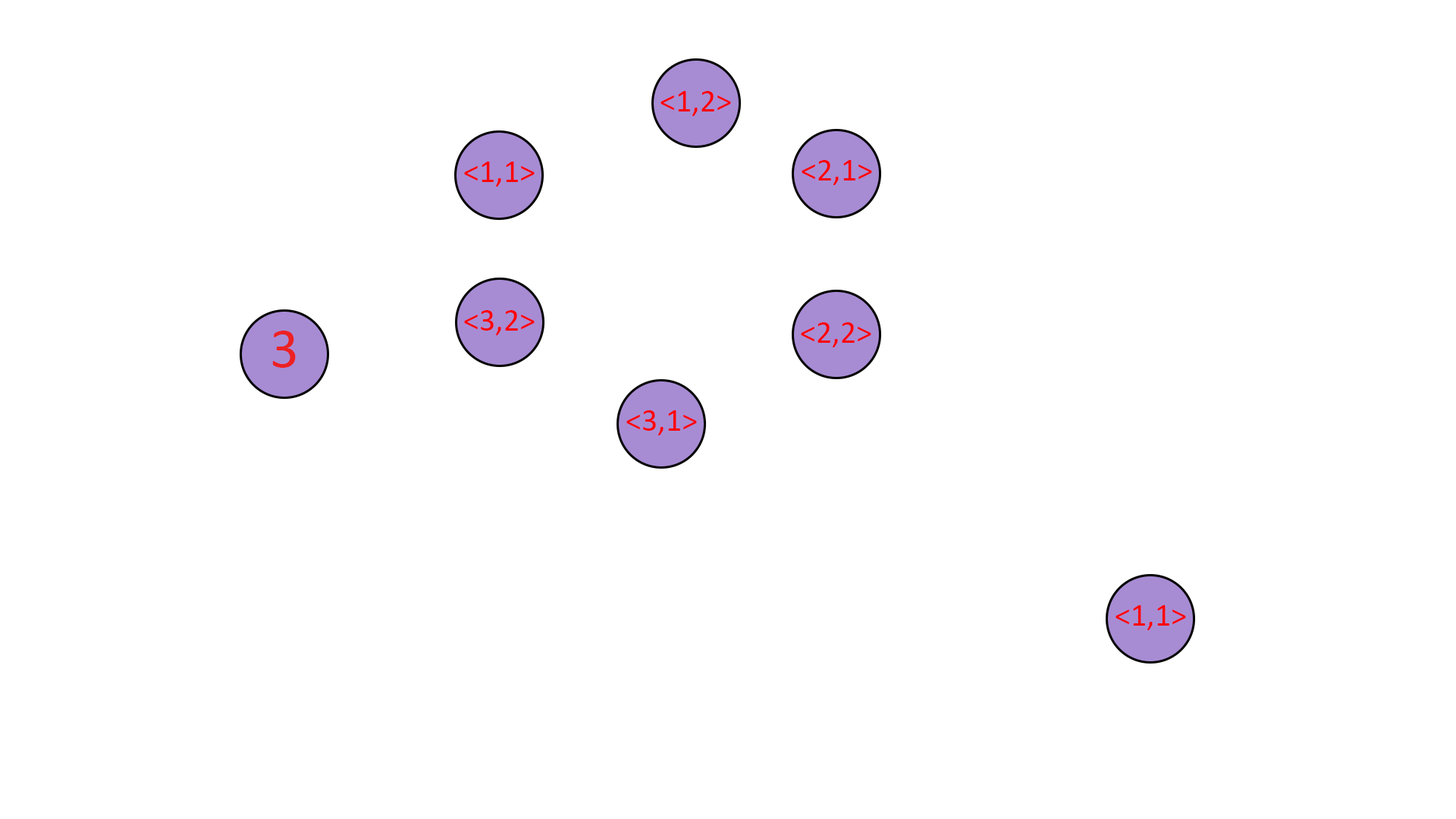
<style>
.page{position:relative;width:1456px;height:819px;background:#ffffff}
.page>*{position:absolute;margin:0}
.t1{font:31.6px "Calibri";color:#ff0000}
</style>
<div class="page">
<p class="t1" style="left:660px;top:91px;width:71px;height:25px">&lt;1,2&gt;</p>
<p class="t1" style="left:464px;top:162px;width:71px;height:25px">&lt;1,1&gt;</p>
<p class="t1" style="left:802px;top:160px;width:70px;height:25px">&lt;2,1&gt;</p>
<p class="t1" style="left:464px;top:310px;width:71px;height:25px">&lt;3,2&gt;</p>
<p class="t1" style="left:801px;top:322px;width:70px;height:25px">&lt;2,2&gt;</p>
<p class="t1" style="left:626px;top:410px;width:71px;height:25px">&lt;3,1&gt;</p>
<p class="t1" style="left:1115px;top:605px;width:71px;height:25px">&lt;1,1&gt;</p>
</div>
